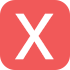
<style>
.page{position:relative;width:70px;height:70px;background:#f15959}
.page>*{position:absolute;margin:0}
.t1{font:60px "KoPubWorldDotumBold";color:#ffffff}
</style>
<div class="page">
<p class="t1" style="left:15px;top:13px;width:39px;height:47px">X</p>
</div>
